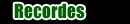
<style>
.page{position:relative;width:130px;height:24px;background:#000000}
.page>*{position:absolute;margin:0}
.t1{font:18px "Impact";color:#006100}
</style>
<div class="page">
<p class="t1" style="left:14px;top:3px;width:71px;height:16px">Recordes</p>
</div>
